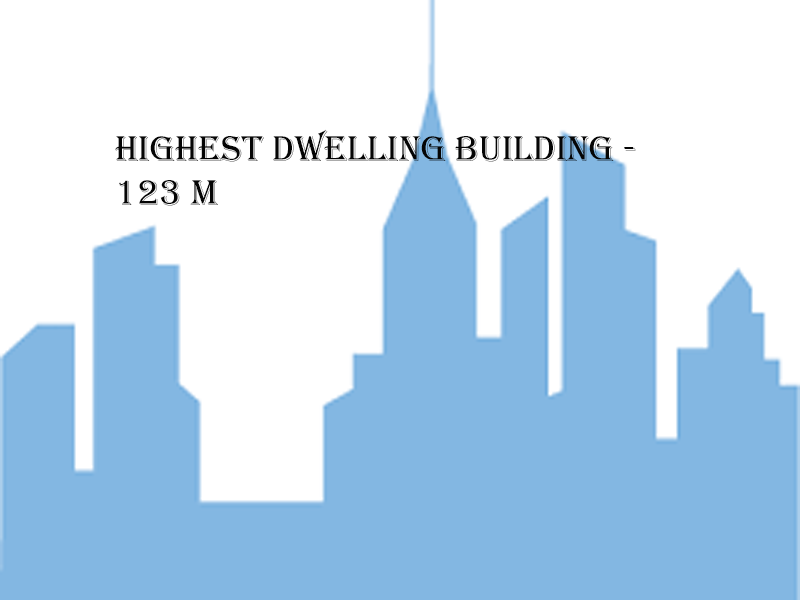
<style>
.page{position:relative;width:800px;height:600px;background:#ffffff}
.page>*{position:absolute;margin:0}
.t1{font:37px "Algerian";color:#050505}
</style>
<div class="page">
<p class="t1" style="left:115px;top:129px;width:521px;height:77px">highest dwelling building -<br>123 m</p>
</div>
